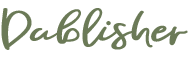
<style>
.page{position:relative;width:188px;height:58px;background:#ffffff}
.page>*{position:absolute;margin:0}
.t1{font:35.8px "stella";color:#6b7a57;scale:1.1 1}
</style>
<div class="page">
<p class="t1" style="left:1px;top:8px;width:187px;height:42px">Dablisher</p>
</div>
